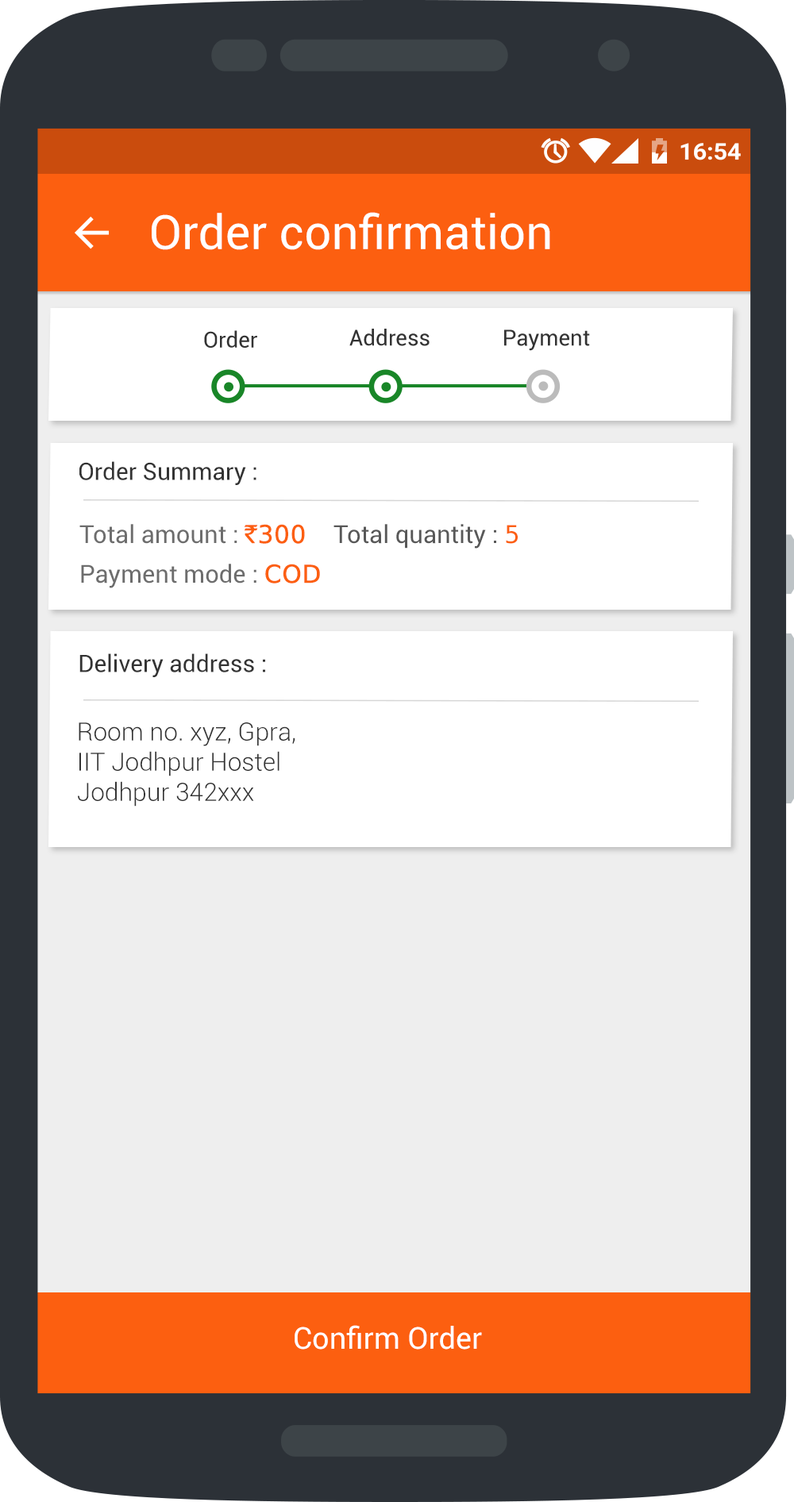
<style>
.page{position:relative;width:794px;height:1502px;background:#eeeeee}
.page>*{position:absolute;margin:0}
.t1{font:47.4px "Roboto-Regular";color:#ffffff}
.t2{font:23.8px "Roboto-Regular";color:#333333}
.t3{font:24.6px "Roboto-Regular";color:#6d6d6d}
.t4{font:24.6px "RupeeForadian";color:#fc5f10;font-weight:bold}
.t5{font:24.6px "Roboto-Regular";color:#585858}
.t6{font:24.6px "RupeeForadian";color:#fc5f10}
.t7{font:25.2px "Roboto-Light";color:#333333}
.t8{font:30.2px "Roboto-Regular";color:#ffffff}
</style>
<div class="page">
<p class="t1" style="left:152px;top:212px;width:398px;height:38px">Order confirmation</p>
<p class="t2" style="left:79px;top:461px;width:177px;height:24px">Order Summary :</p>
<p class="t3" style="left:79px;top:524px;width:226px;height:20px">Total amount : <span class="t4">`300</span></p>
<p class="t5" style="left:333px;top:524px;width:185px;height:25px">Total quantity : <span class="t6">5</span></p>
<p class="t3" style="left:81px;top:564px;width:239px;height:24px">Payment mode : <span class="t4">COD</span></p>
<p class="t2" style="left:79px;top:653px;width:186px;height:24px">Delivery address :</p>
<p class="t7" style="left:78px;top:722px;width:217px;height:85px">Room no. xyz, Gpra,<br>IIT Jodhpur Hostel<br>Jodhpur 342xxx</p>
<p class="t8" style="left:295px;top:1325px;width:187px;height:25px">Confirm Order</p>
</div>
